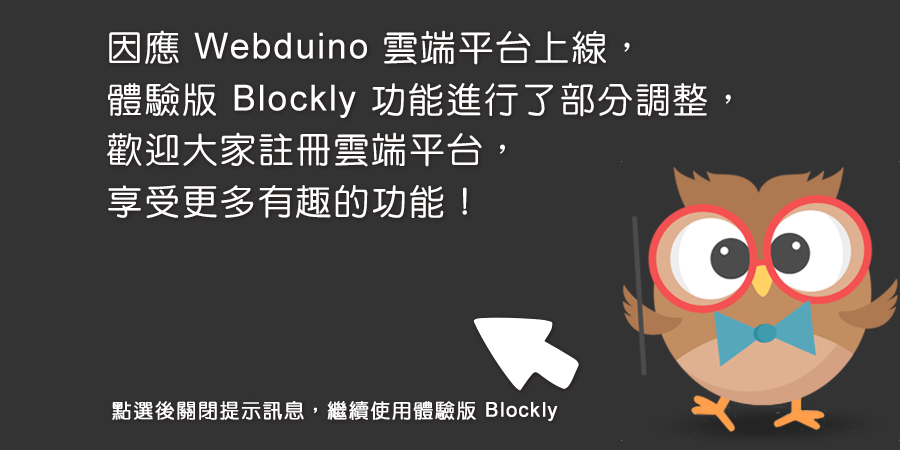
<style>
.page{position:relative;width:900px;height:450px;background:#333333}
.page>*{position:absolute;margin:0}
.t1{font:36px/52px "DFYuan-Md-HK-BF";letter-spacing:0.05em;color:#ffffff}
.t2{font:36px/52px "ArialMT";letter-spacing:0.05em;color:#ffffff}
.t3{font:20px "DFYuan-Md-HK-BF";letter-spacing:0.05em;color:#ffffff;font-weight:bold}
.t4{font:20px "ArialMT";letter-spacing:0.05em;color:#ffffff;font-weight:bold}
</style>
<div class="page">
<p class="t1" style="left:107px;top:30px;width:624px;height:188px;text-align:justify">因應<span class="t2"> Webduino </span>雲端平台上線，<br>體驗版<span class="t2"> Blockly </span>功能進行了部分調整，<br>歡迎大家註冊雲端平台，<br>享受更多有趣的功能！</p>
<p class="t3" style="left:112px;top:401px;width:446px;height:20px">點選後關閉提示訊息，繼續使用體驗版<span class="t4"> Blockly</span></p>
</div>
